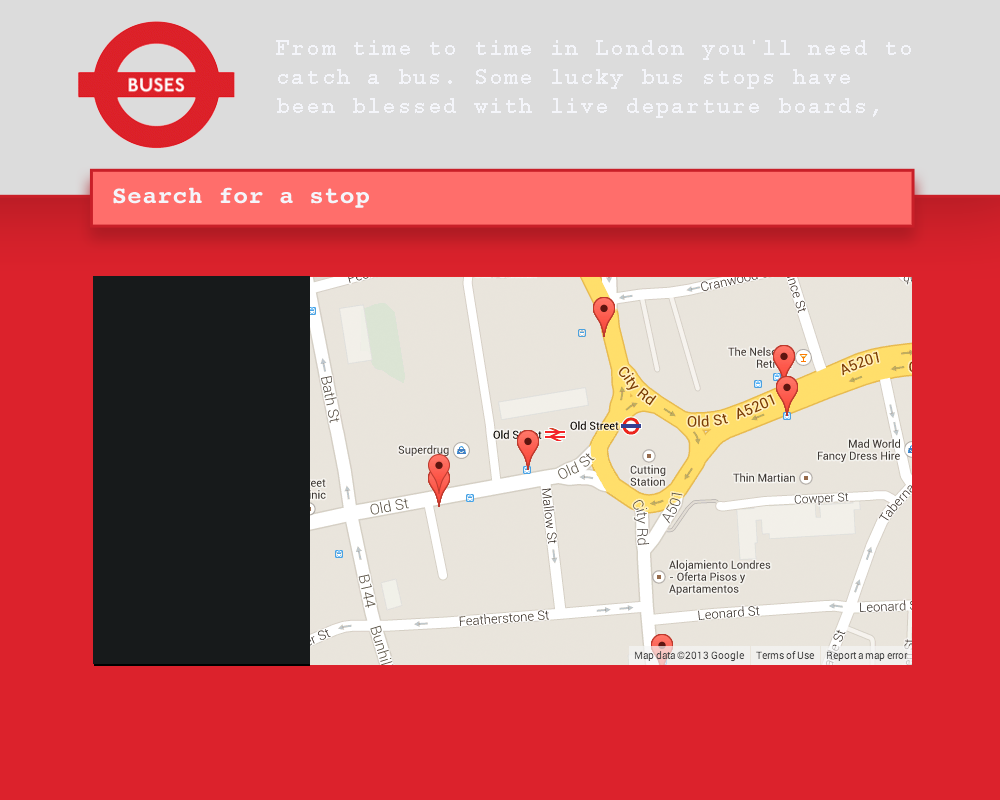
<style>
.page{position:relative;width:1000px;height:800px;background:#dc222c}
.page>*{position:absolute;margin:0}
.t1{font:24px "Courier-Bold";letter-spacing:0.05em;color:#f4f5fa}
</style>
<div class="page">
<p class="t1" style="left:276px;top:40px;width:635px;height:78px">From time to time in London you'll need to catch a bus. Some lucky bus stops have been blessed with live departure boards, some are lagging behind.</p>
<p class="t1" style="left:113px;top:187px;width:256px;height:21px">Search for a stop</p>
</div>
